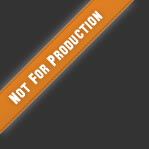
<style>
.page{position:relative;width:149px;height:149px;background:#333333}
.page>*{position:absolute;margin:0}
.t1{font:16px "SFCollegiateSolid";color:#ffffff}
</style>
<div class="page">
<p class="t1" style="left:8px;top:10px;width:95px;height:95px;rotate:-45deg">Not For Production</p>
</div>
